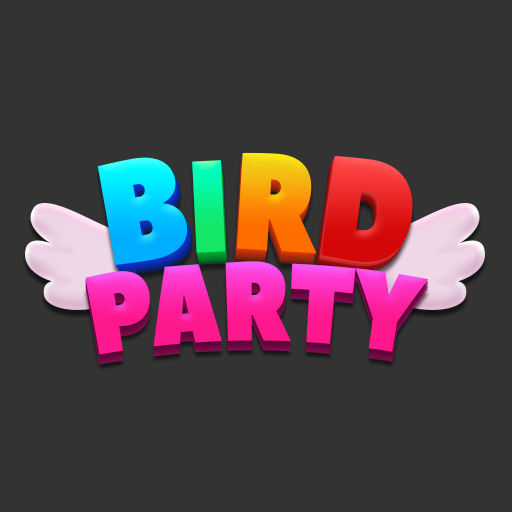
<style>
.page{position:relative;width:512px;height:512px;background:#333333}
.page>*{position:absolute;margin:0}
.t1{font:142.7px "PeaceSans";text-transform:uppercase;scale:0.85 1}
.t2{font:130.3px "PeaceSans";text-transform:uppercase;scale:0.85 1}
.t3{font:136.5px "PeaceSans";text-transform:uppercase;scale:0.85 1}
.t4{font:111.7px "PeaceSans";text-transform:uppercase;scale:0.77 1}
</style>
<div class="page">
<p class="t1" style="left:97px;top:157px;width:91px;height:108px;rotate:-10deg">B</p>
<p class="t2" style="left:192px;top:160px;width:34px;height:93px;rotate:-3deg">i</p>
<p class="t3" style="left:236px;top:152px;width:81px;height:102px;rotate:3deg">R</p>
<p class="t1" style="left:321px;top:156px;width:92px;height:106px;rotate:8deg">D</p>
<p class="t4" style="left:85px;top:261px;width:344px;height:94px">PARTY</p>
</div>
